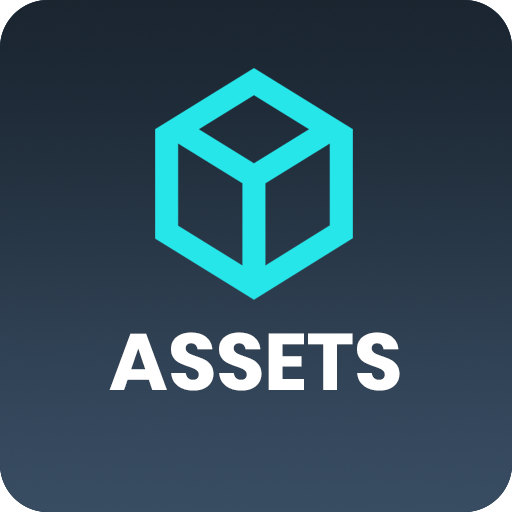
<style>
.page{position:relative;width:512px;height:512px}
.page>*{position:absolute;margin:0}
.t1{font:80px "Poppins-Bold";color:#ffffff}
</style>
<div class="page">
<p class="t1" style="left:109px;top:332px;width:291px;height:59px">ASSETS</p>
</div>
